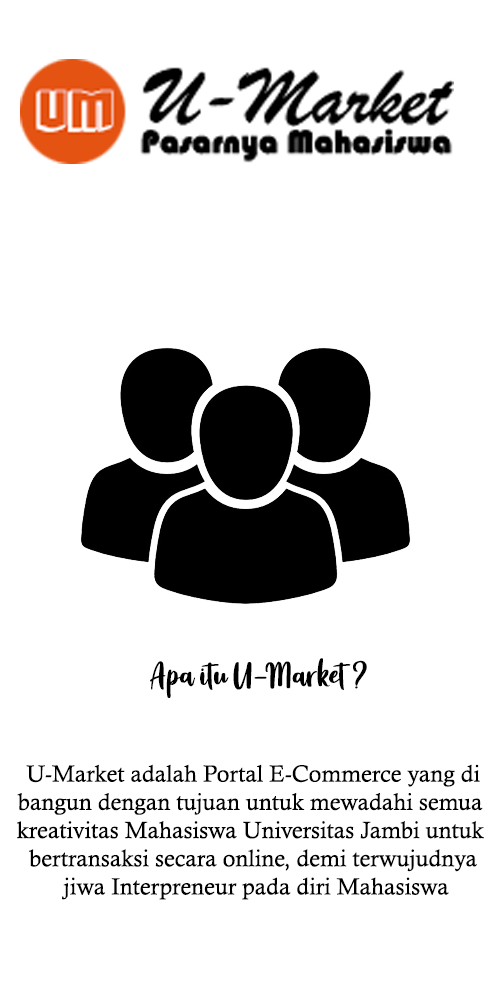
<style>
.page{position:relative;width:500px;height:1000px;background:#ffffff}
.page>*{position:absolute;margin:0}
.t1{font:41.7px "Angelina-Demo";color:#000000}
.t2{font:23.5px "CalistoMT";color:#000000}
</style>
<div class="page">
<p class="t1" style="left:150px;top:658px;width:217px;height:40px">Apa itu U-Market ?</p>
<p class="t2" style="left:17px;top:764px;width:467px;height:136px;text-align:center">U-Market adalah Portal E-Commerce yang di<br>bangun dengan tujuan untuk mewadahi semua <br>kreativitas Mahasiswa Universitas Jambi untuk <br>bertransaksi secara online, demi terwujudnya<br> jiwa Interpreneur pada diri Mahasiswa</p>
</div>
